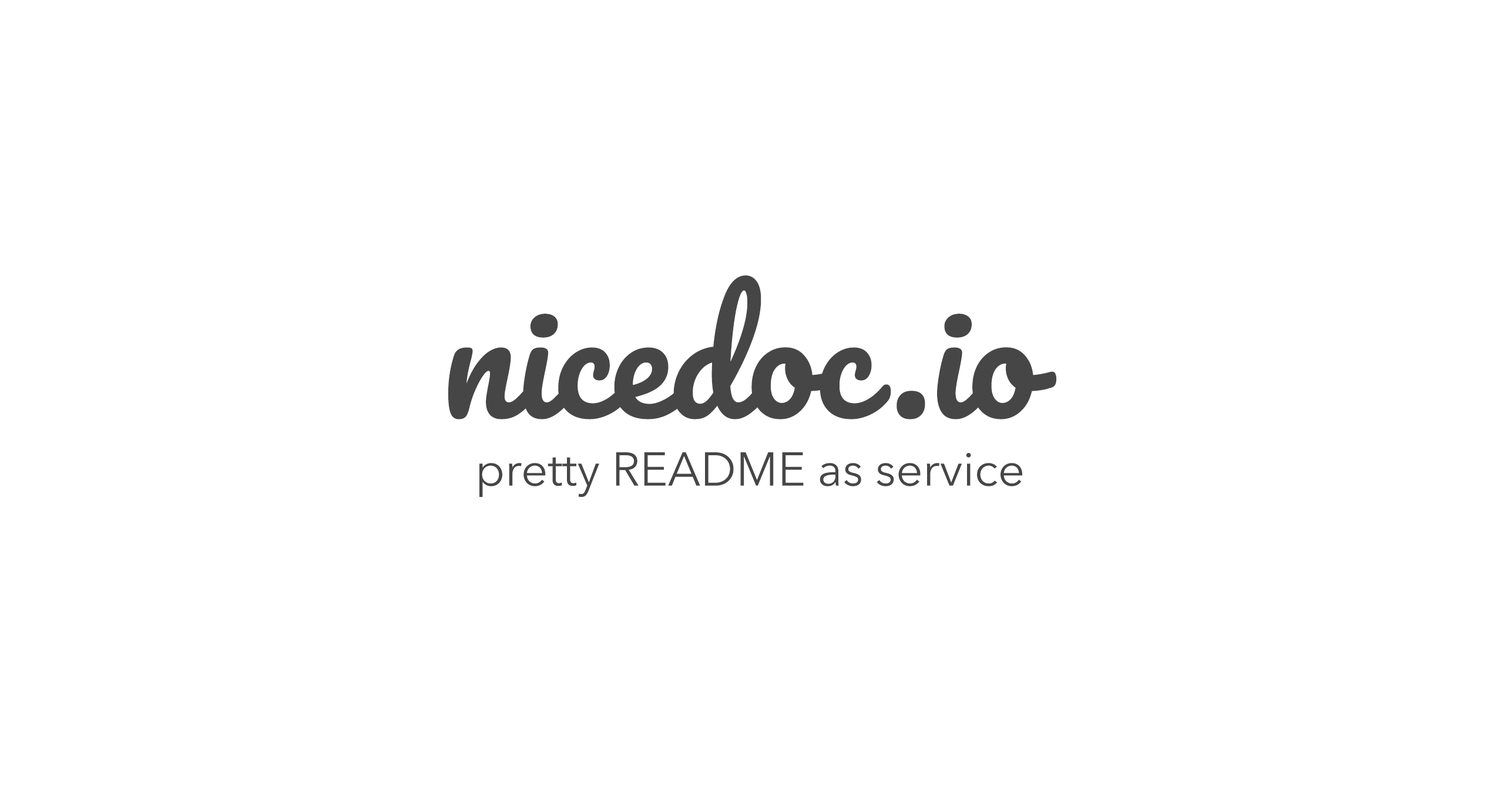
<style>
.page{position:relative;width:1504px;height:793px;background:#ffffff}
.page>*{position:absolute;margin:0}
.t1{font:152px "Pacifico-Regular";color:#464646}
.t2{font:47px "AvenirNext-Regular";color:#464646}
</style>
<div class="page">
<p class="t1" style="left:448px;top:275px;width:608px;height:144px">nicedoc.io</p>
<p class="t2" style="left:479px;top:452px;width:543px;height:45px">pretty README as service</p>
</div>
